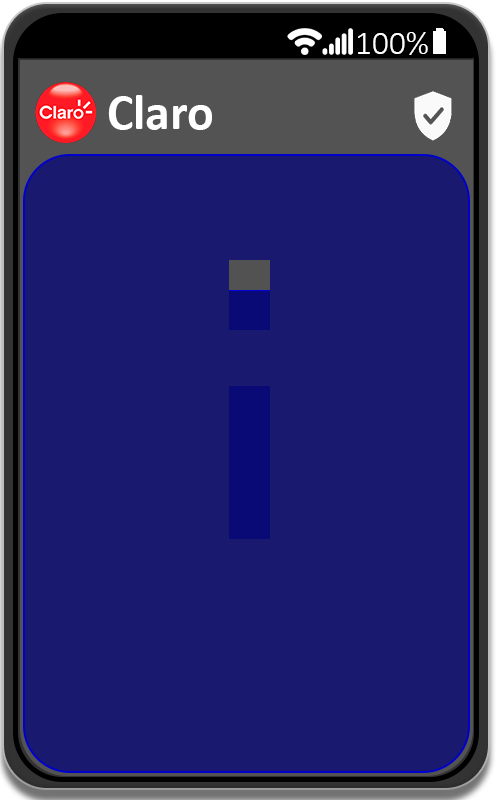
<style>
.page{position:relative;width:500px;height:800px;background:#191970}
.page>*{position:absolute;margin:0}
.t1{font:33.3px "Calibri-Light";color:#ffffff}
.t2{font:50px "Calibri-Bold";color:#ffffff}
</style>
<div class="page">
<p class="t1" style="left:358px;top:32px;width:70px;height:23px">100%</p>
<p class="t2" style="left:108px;top:95px;width:104px;height:35px">Claro</p>
</div>
